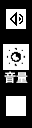
<style>
.page{position:relative;width:32px;height:128px;background:#000000}
.page>*{position:absolute;margin:0}
.t1{font:12px "AdobeHeitiStd-Regular";color:#ffffff}
</style>
<div class="page">
<p class="t1" style="left:4px;top:71px;width:24px;height:12px">音量</p>
</div>
